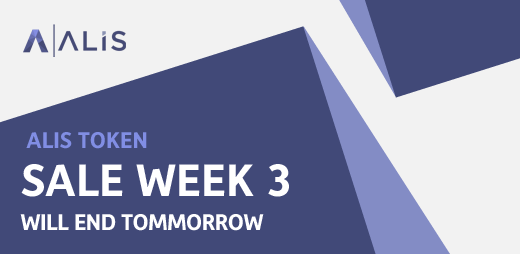
<style>
.page{position:relative;width:520px;height:254px;background:#414978}
.page>*{position:absolute;margin:0}
.t1{font:23px "Depot-Bold";color:#818ee4;text-transform:uppercase}
.t2{font:46px "Depot-Bold";color:#ffffff;text-transform:uppercase}
.t3{font:23px "Depot-Bold";letter-spacing:-0.02em;color:#ffffff;text-transform:uppercase}
</style>
<div class="page">
<p class="t1" style="left:26px;top:132px;width:121px;height:17px">ALIS TOKEN</p>
<p class="t2" style="left:21px;top:164px;width:268px;height:33px">SALE week 3</p>
<p class="t3" style="left:20px;top:214px;width:244px;height:17px">will end tommorrow</p>
</div>
